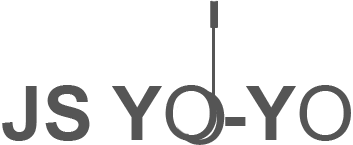
<style>
.page{position:relative;width:353px;height:145px;background:#ffffff}
.page>*{position:absolute;margin:0}
.t1{font:75px "Arial-BoldMT";color:#555555}
.t2{font:75px "ArialMT";color:#555555}
</style>
<div class="page">
<p class="t1" style="left:2px;top:85px;width:349px;height:56px">JS Y<span class="t2">O</span>-Y<span class="t2">O</span></p>
</div>
